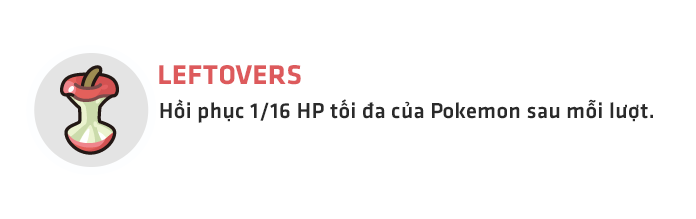
<style>
.page{position:relative;width:696px;height:219px;background:#ffffff}
.page>*{position:absolute;margin:0}
.t1{font:28.1px "UTMFacebookK&TBold";letter-spacing:0.02em;color:#dd5a5c}
.t2{font:22.5px "UTM-Facebook-K&T";letter-spacing:0.02em;color:#2a2a2a}
</style>
<div class="page">
<p class="t1" style="left:159px;top:65px;width:142px;height:20px">LEFTOVERS</p>
<p class="t2" style="left:160px;top:99px;width:493px;height:24px">Hồi phục 1/16 HP tối đa của Pokemon sau mỗi lượt.</p>
</div>
